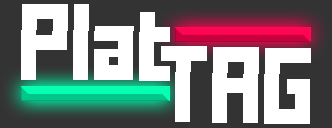
<style>
.page{position:relative;width:332px;height:128px;background:#ffffff}
.page>*{position:absolute;margin:0}
.t1{font:61px "FFFForward";letter-spacing:-0.02em;color:#ffffff}
</style>
<div class="page">
<p class="t1" style="left:21px;top:4px;width:149px;height:77px;rotate:1deg">Plat</p>
<p class="t1" style="left:21px;top:4px;width:149px;height:77px;rotate:1deg">Plat</p>
<p class="t1" style="left:161px;top:46px;width:150px;height:78px;rotate:1deg">TAG</p>
<p class="t1" style="left:161px;top:46px;width:150px;height:78px;rotate:1deg">TAG</p>
</div>
